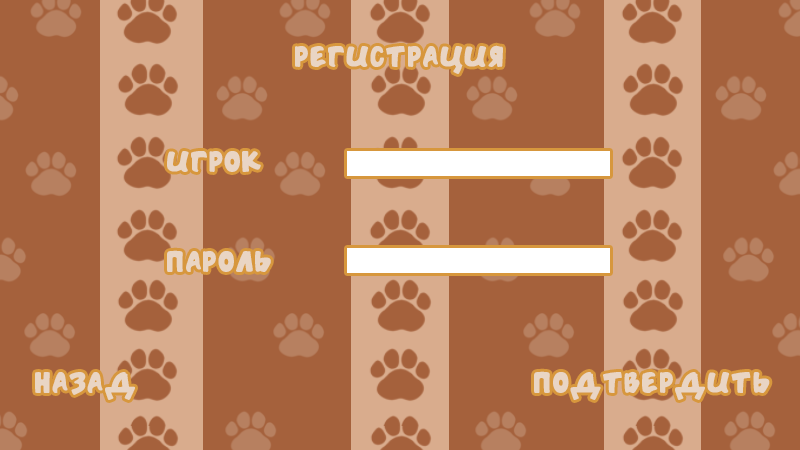
<style>
.page{position:relative;width:800px;height:450px;background:#a5613c}
.page>*{position:absolute;margin:0}
.t1{font:24px "HandSound";color:#e9d5c4}
</style>
<div class="page">
<p class="t1" style="left:295px;top:45px;width:208px;height:29px">РЕГИСТРАЦИЯ</p>
<p class="t1" style="left:167px;top:151px;width:94px;height:21px">ИГРОК</p>
<p class="t1" style="left:167px;top:250px;width:104px;height:22px">ПАРОЛЬ</p>
<p class="t1" style="left:35px;top:372px;width:100px;height:28px">НАЗАД</p>
<p class="t1" style="left:534px;top:371px;width:236px;height:29px">ПОДТВЕРДИТЬ</p>
</div>
